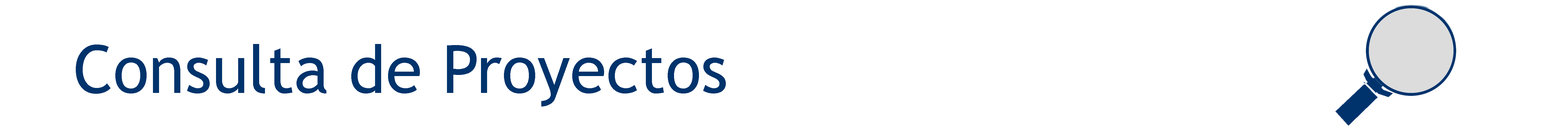
<style>
.page{position:relative;width:1568px;height:138px;background:#ffffff}
.page>*{position:absolute;margin:0}
.t1{font:66.4px "TrebuchetMS";color:#00336c}
</style>
<div class="page">
<p class="t1" style="left:76px;top:44px;width:650px;height:62px">Consulta de Proyectos</p>
</div>
